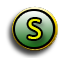
<style>
.page{position:relative;width:64px;height:64px;background:#ffffff}
.page>*{position:absolute;margin:0}
.t1{font:30px "Seravek";color:#ebee05}
</style>
<div class="page">
<p class="t1" style="left:28px;top:19px;width:13px;height:20px">S</p>
</div>
